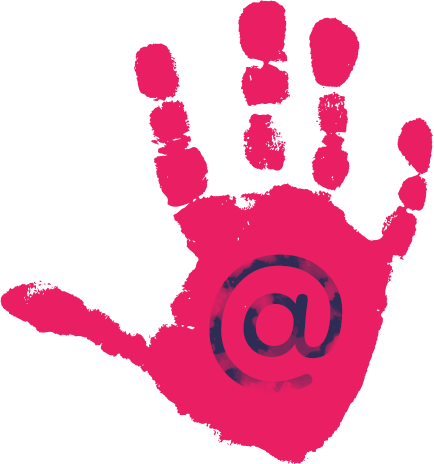
<style>
.page{position:relative;width:434px;height:464px;background:#ffffff}
.page>*{position:absolute;margin:0}
.t1{font:161.5px "Linotte-Regular"}
</style>
<div class="page">
<p class="t1" style="left:209px;top:254px;width:134px;height:140px">@</p>
</div>
